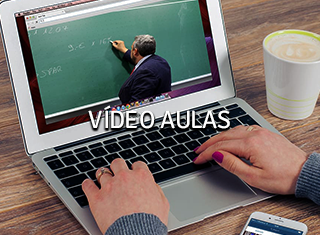
<style>
.page{position:relative;width:320px;height:235px}
.page>*{position:absolute;margin:0}
.t1{font:25px "Signika-Regular";letter-spacing:-0.01em;color:#ffffff}
</style>
<div class="page">
<p class="t1" style="left:88px;top:105px;width:142px;height:24px">VÍDEO AULAS</p>
</div>
